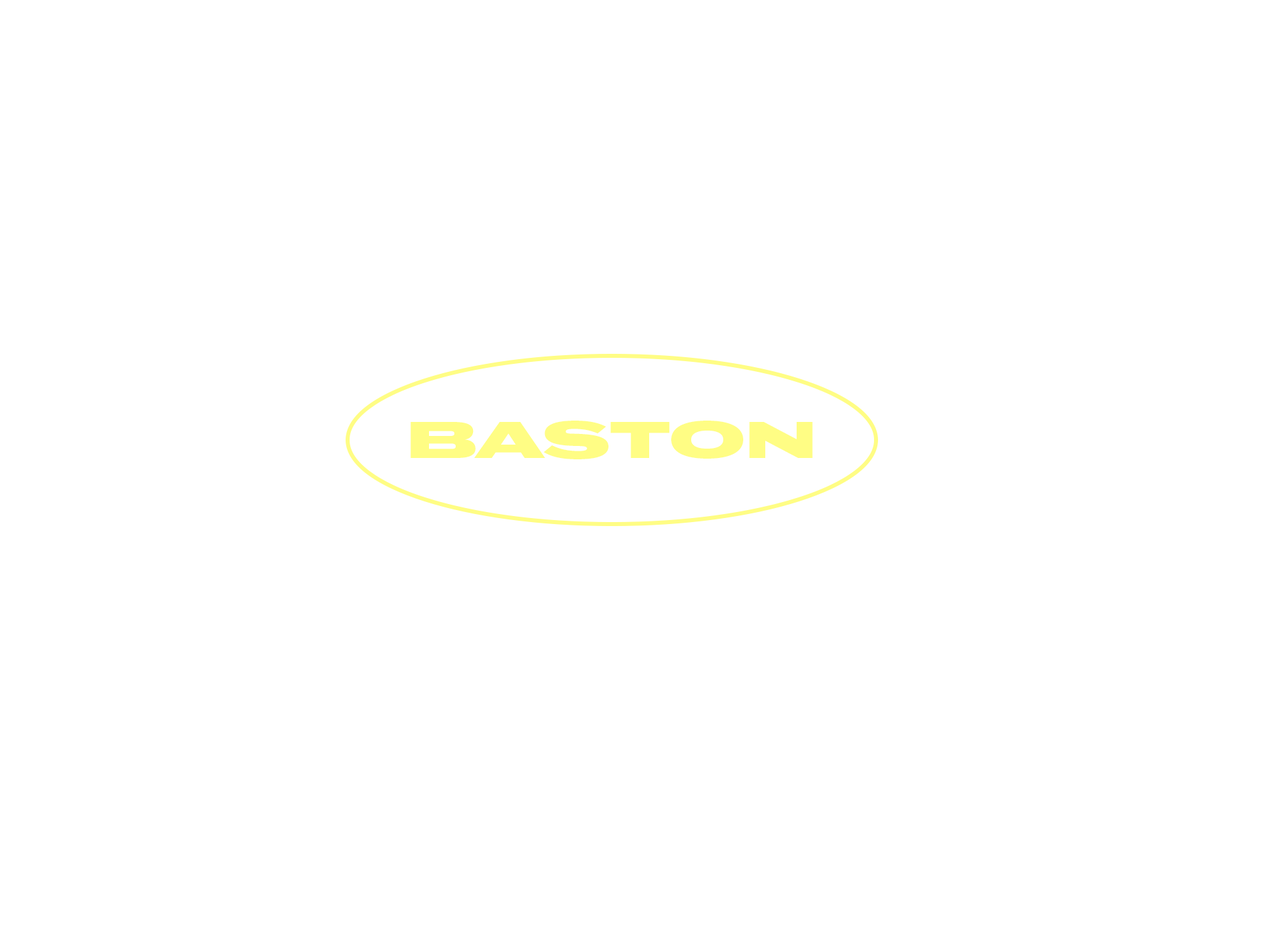
<style>
.page{position:relative;width:1261px;height:946px;background:#ffffff}
.page>*{position:absolute;margin:0}
.t1{font:50px "WeddingGothicATFWide-Black";color:#fffd84}
</style>
<div class="page">
<p class="t1" style="left:410px;top:420px;width:403px;height:39px">BASTON</p>
</div>
